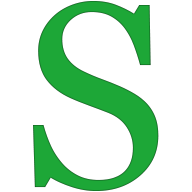
<style>
.page{position:relative;width:192px;height:192px;background:#ffffff}
.page>*{position:absolute;margin:0}
.t1{font:262.5px "Georgia";color:#1da737}
</style>
<div class="page">
<p class="t1" style="left:33px;top:1px;width:126px;height:190px">S</p>
</div>
